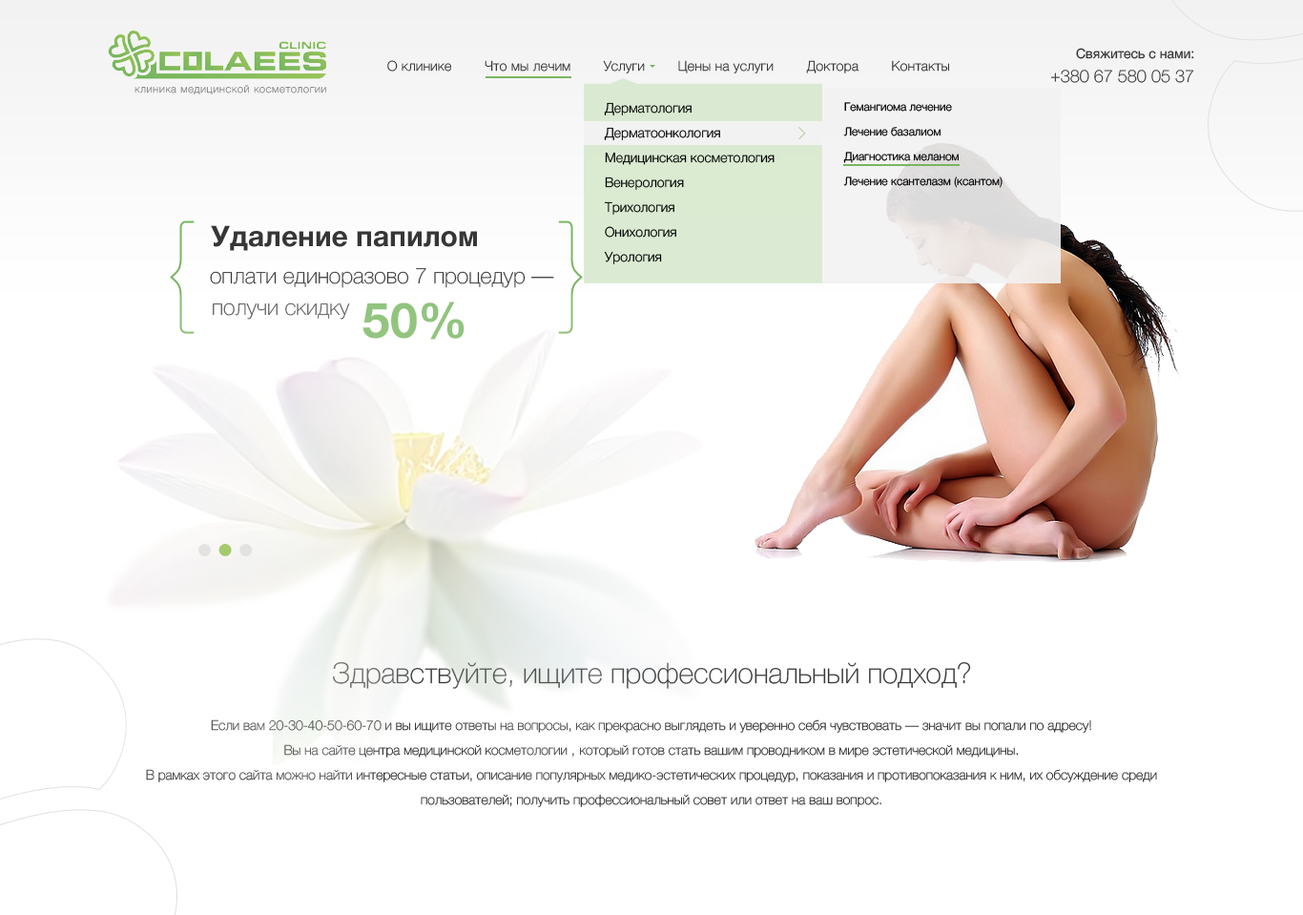
<style>
.page{position:relative;width:1303px;height:915px;background:#ffffff}
.page>*{position:absolute;margin:0}
.t1{font:13.4px "HelveticaNeueCyr-Roman";color:#363636}
.t2{font:13.4px "HelveticaNeueCyr-Thin";letter-spacing:0.03em;color:#363636}
.t3{font:17.2px "HelveticaNeueCyr-Thin";color:#363636}
.t4{font:10.5px "HelveticaNeueCyr-Thin";letter-spacing:0.075em;color:#898989}
.t5{font:13.4px/24.8px "HelveticaNeueCyr-Light";color:#000000}
.t6{font:11.4px/24.8px "HelveticaNeueCyr-Light";color:#000000}
.t7{font:28.6px "HelveticaNeueCyr-Bold";color:#363636}
.t8{font:21.9px "HelveticaNeueCyr-Thin";color:#363636}
.t9{font:21.9px "HelveticaNeueCyr-Thin";color:#5a5a5a}
.t10{font:49.6px "HelveticaNeueCyr-Bold";color:#92c47f}
.t11{font:28.6px "HelveticaNeueCyr-Thin";color:#404041}
.t12{font:13.4px/24.8px "HelveticaNeueCyr-Thin";color:#363636}
.t13{font:13.4px/24.8px "HelveticaNeueCyr-Thin";letter-spacing:0.05em;color:#363636}
</style>
<div class="page">
<p class="t1" style="left:1076px;top:48px;width:119px;height:11px">Свяжитесь с нами:</p>
<p class="t2" style="left:387px;top:60px;width:562px;height:13px">О клинике        Что мы лечим        Услуги        Цены на услуги        Доктора        Контакты</p>
<p class="t3" style="left:1050px;top:70px;width:145px;height:13px">+380 67 580 05 37</p>
<p class="t4" style="left:135px;top:85px;width:191px;height:9px">клиника медицинской косметологии</p>
<p class="t5" style="left:604px;top:102px;width:171px;height:162px">Дерматология<br>Дерматоонкология<br>Медицинская косметология<br>Венерология <br>Трихология<br>Онихология<br>Урология</p>
<p class="t6" style="left:843px;top:102px;width:160px;height:86px">Гемангиома лечение<br>Лечение базалиом<br>Диагностика меланом<br>Лечение ксантелазм (ксантом)</p>
<p class="t7" style="left:211px;top:225px;width:266px;height:26px">Удаление папилом</p>
<p class="t8" style="left:210px;top:268px;width:344px;height:20px">оплати единоразово 7 процедур —</p>
<p class="t9" style="left:213px;top:302px;width:137px;height:18px">получи скидку</p>
<p class="t10" style="left:363px;top:301px;width:102px;height:39px">50%</p>
<p class="t11" style="left:333px;top:662px;width:638px;height:27px">Здравствуйте, ищите профессиональный подход?</p>
<p class="t12" style="left:146px;top:719px;width:1011px;height:88px;text-align:center">Если вам 20-30-40-50-60-70 и вы ищите ответы на вопросы, как прекрасно выглядеть и уверенно себя чувствовать — значит вы попали по адресу!<br>Вы на сайте центра медицинской косметологии <span class="t13">,</span> который готов стать вашим проводником в мире эстетической медицины. <br>В рамках этого сайта можно найти интересные статьи, описание популярных медико-эстетических процедур, показания и противопоказания к ним, их обсуждение среди пользователей; получить профессиональный совет или ответ на ваш вопрос.</p>
</div>
